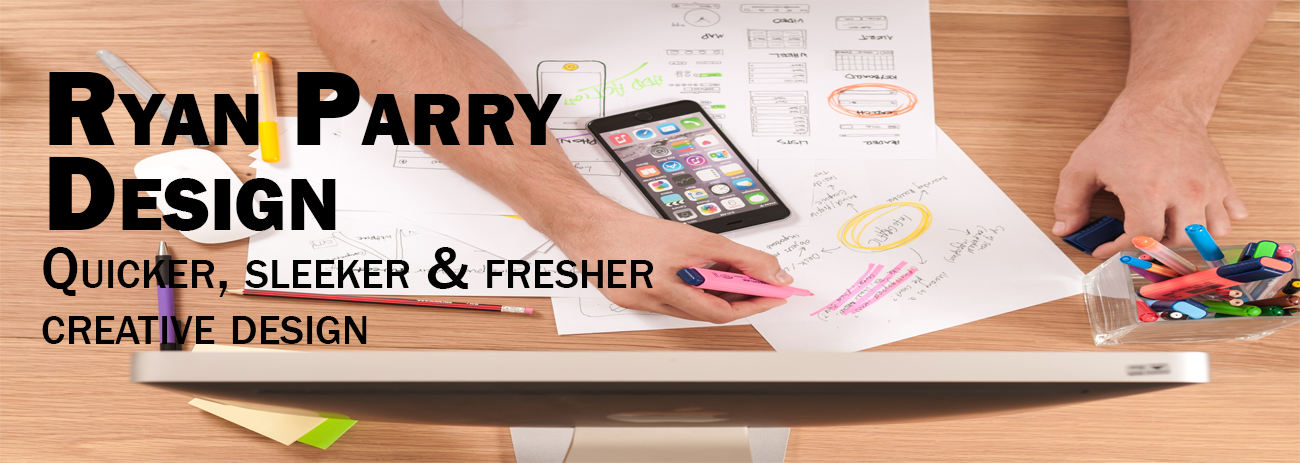
<style>
.page{position:relative;width:1300px;height:463px}
.page>*{position:absolute;margin:0}
.t1{font:110px/85px "FranklinGothic-Heavy";color:#000000;font-variant:small-caps}
.t2{font:60px/56px "FranklinGothic-Medium";color:#010101;font-variant:small-caps}
</style>
<div class="page">
<p class="t1" style="left:49px;top:72px;width:513px;height:159px">Ryan Parry<br>Design</p>
<p class="t2" style="left:42px;top:247px;width:611px;height:97px">Quicker, sleeker &amp; fresher<br>creative design</p>
</div>
